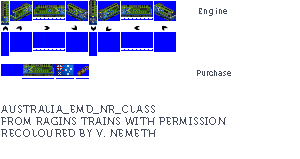
<style>
.page{position:relative;width:300px;height:159px;background:#ffffff}
.page>*{position:absolute;margin:0}
.t1{font:8px "Museo700-Regular";letter-spacing:0.075em;color:#444c5c}
.t2{font:8px "Museo700-Regular";color:#444c5c}
.t3{font:10px "Museo700-Regular";letter-spacing:0.075em;color:#444c5c;text-transform:uppercase}
</style>
<div class="page">
<p class="t1" style="left:199px;top:8px;width:28px;height:8px">Engine</p>
<p class="t2" style="left:197px;top:70px;width:34px;height:6px">Purchase</p>
<p class="t3" style="left:1px;top:105px;width:225px;height:32px">Australia_EMD_NR_Class<br>from ragins trains with permission<br>recoloured by v. nemeth</p>
</div>
